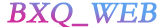
<style>
.page{position:relative;width:166px;height:27px;background:#ffffff}
.page>*{position:absolute;margin:0}
.t1{font:30px "STFangsong";letter-spacing:0.01em;font-weight:bold;font-style:italic}
</style>
<div class="page">
<p class="t1" style="left:7px;top:2px;width:150px;height:27px">BXQ_WEB</p>
</div>
